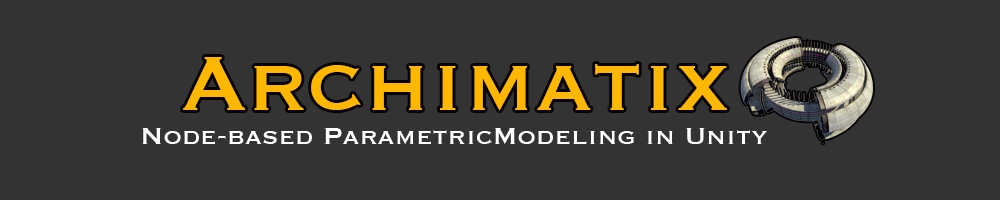
<style>
.page{position:relative;width:1000px;height:200px;background:#333333}
.page>*{position:absolute;margin:0}
.t1{font:100px "Copperplate";color:#ffb700}
.t2{font:30px "Copperplate";color:#ffffff}
</style>
<div class="page">
<p class="t1" style="left:183px;top:57px;width:544px;height:53px">Archimatix</p>
<p class="t2" style="left:142px;top:128px;width:625px;height:16px">Node-based ParametricModeling in Unity</p>
</div>
